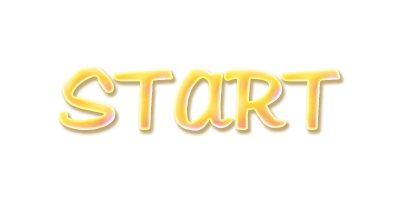
<style>
.page{position:relative;width:400px;height:200px;background:#ffffff}
.page>*{position:absolute;margin:0}
.t1{font:80px "Martina";text-transform:uppercase;font-weight:bold;scale:1.04 1}
</style>
<div class="page">
<p class="t1" style="left:58px;top:66px;width:283px;height:65px">START</p>
</div>
